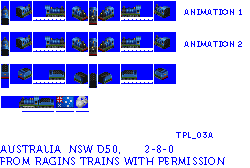
<style>
.page{position:relative;width:250px;height:168px;background:#ffffff}
.page>*{position:absolute;margin:0}
.t1{font:8px "Museo700-Regular";letter-spacing:0.075em;color:#0000ff;text-transform:uppercase}
.t2{font:10px "Museo700-Regular";letter-spacing:0.075em;color:#0000ff;text-transform:uppercase}
</style>
<div class="page">
<p class="t1" style="left:184px;top:9px;width:58px;height:6px">Animation 1</p>
<p class="t1" style="left:184px;top:41px;width:58px;height:6px">Animation 2</p>
<p class="t1" style="left:176px;top:132px;width:37px;height:7px">tpl_03a</p>
<p class="t2" style="left:0px;top:145px;width:225px;height:20px">australia  nsw d50,  2-8-0<br>from ragins trains with permission</p>
</div>
